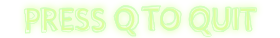
<style>
.page{position:relative;width:280px;height:38px}
.page>*{position:absolute;margin:0}
.t1{font:30.1px "Lato-Regular";letter-spacing:0.025em;color:#f4ffa8;text-transform:uppercase;scale:0.9 1}
</style>
<div class="page">
<p class="t1" style="left:27px;top:8px;width:229px;height:27px">Press Q To Quit</p>
</div>
